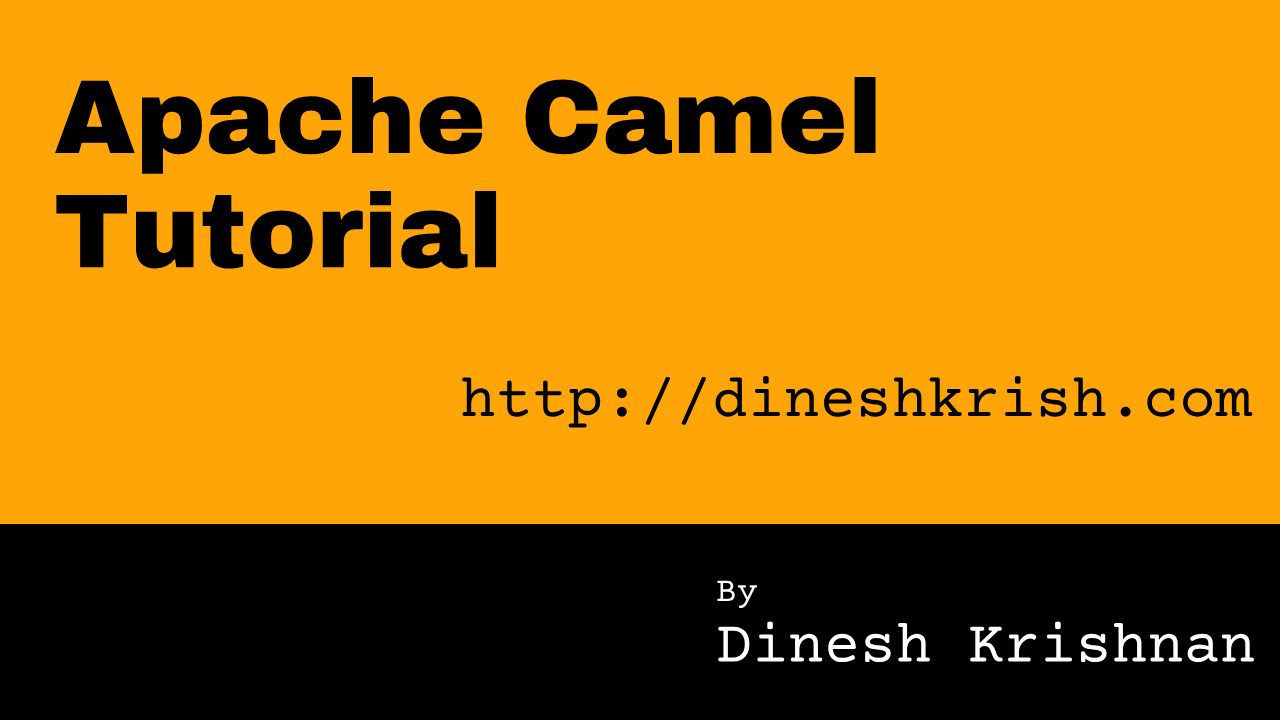
<style>
.page{position:relative;width:1280px;height:720px;background:#ffa508}
.page>*{position:absolute;margin:0}
.t1{font:105px "ArchivoBlack-Regular";color:#000000}
.t2{font:60px "CourierPrime";color:#000000}
.t3{font:60px "CourierPrime";color:#ffffff}
.t4{font:35px "CourierPrime";color:#ffffff}
</style>
<div class="page">
<p class="t1" style="left:55px;top:76px;width:821px;height:193px">Apache Camel <br>Tutorial</p>
<p class="t2" style="left:462px;top:376px;width:791px;height:52px">http://dineshkrish.com</p>
<p class="t3" style="left:717px;top:580px;width:537px;height:83px"><span class="t4">By<br></span>Dinesh Krishnan</p>
</div>
